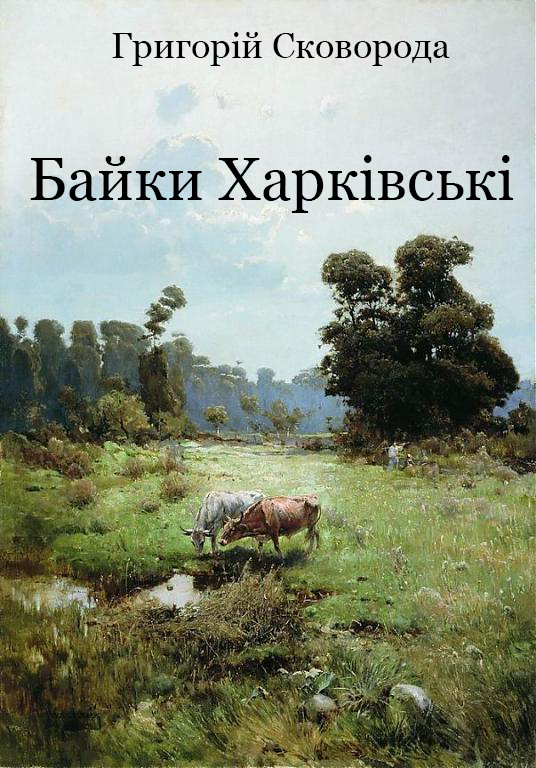
<style>
.page{position:relative;width:536px;height:768px}
.page>*{position:absolute;margin:0}
.t1{font:36px "Georgia";color:#000000}
.t2{font:60px "Georgia";color:#000000}
</style>
<div class="page">
<p class="t1" style="left:112px;top:32px;width:338px;height:34px">Григорій Сковорода</p>
<p class="t2" style="left:30px;top:155px;width:484px;height:58px">Байки Харківські</p>
</div>
